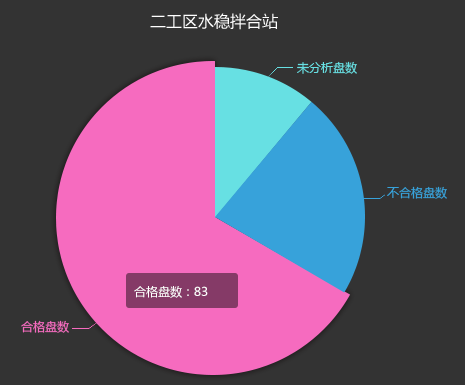
<style>
.page{position:relative;width:465px;height:385px;background:#333333}
.page>*{position:absolute;margin:0}
.t1{font:16px "MicrosoftYaHei";color:#ffffff}
.t2{font:12px "MicrosoftYaHei";color:#67e0e3}
.t3{font:12px "MicrosoftYaHei";color:#37a2da}
.t4{font:12px "MicrosoftYaHei";color:#ffffff}
.t5{font:12px "MicrosoftYaHei";color:#f66bbf}
</style>
<div class="page">
<p class="t1" style="left:150px;top:13px;width:128px;height:17px">二工区水稳拌合站</p>
<p class="t2" style="left:297px;top:61px;width:60px;height:13px">未分析盘数</p>
<p class="t3" style="left:387px;top:186px;width:60px;height:13px">不合格盘数</p>
<p class="t4" style="left:134px;top:286px;width:74px;height:12px">合格盘数：83</p>
<p class="t5" style="left:21px;top:320px;width:48px;height:13px">合格盘数</p>
</div>
